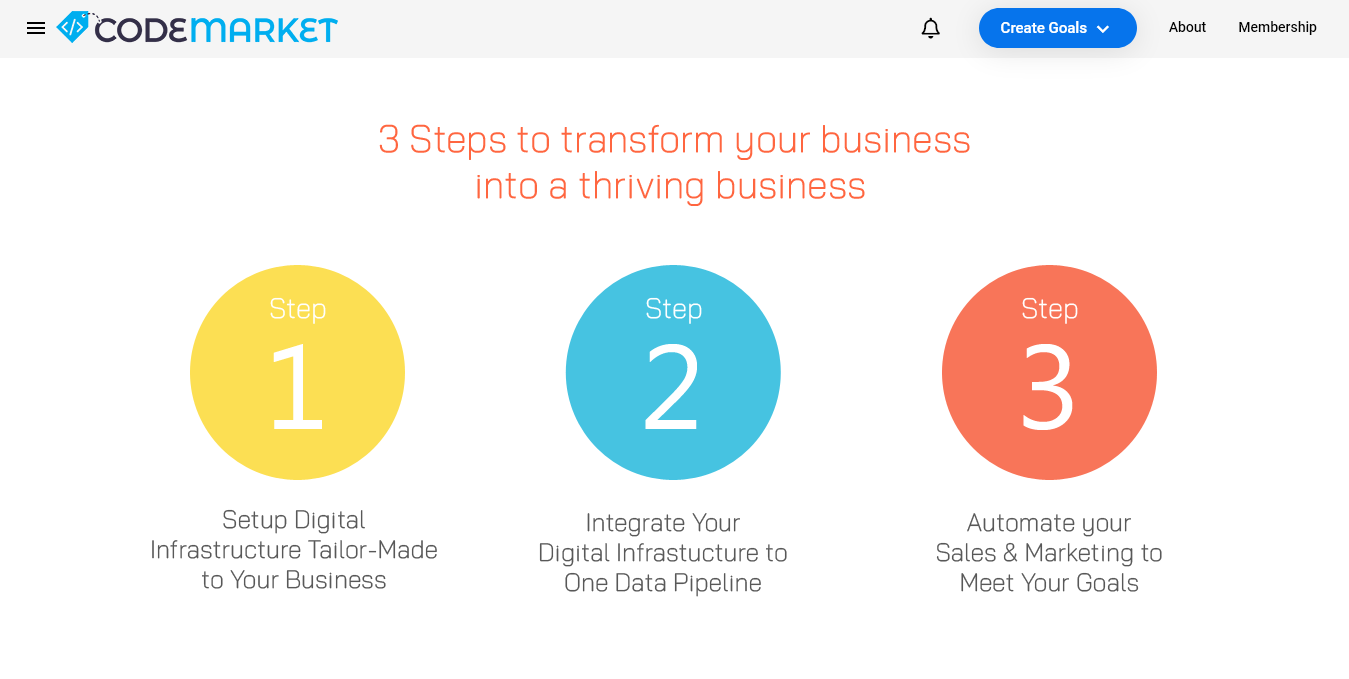
<style>
.page{position:relative;width:1349px;height:679px;background:#ffffff}
.page>*{position:absolute;margin:0}
.t1{font:38px "Rectory-Regular";color:#ff6640}
.t2{font:28.1px "Rectory-Regular";color:#ffffff}
.t3{font:120px "SegoeUISymbol";color:#ffffff}
.t4{font:25px "Rectory-Regular";color:#585858}
</style>
<div class="page">
<p class="t1" style="left:379px;top:124px;width:591px;height:82px;text-align:center">3 Steps to transform your business <br>into a thriving business</p>
<p class="t2" style="left:270px;top:297px;width:56px;height:27px">Step</p>
<p class="t2" style="left:646px;top:297px;width:56px;height:27px">Step</p>
<p class="t2" style="left:1022px;top:297px;width:56px;height:27px">Step</p>
<p class="t3" style="left:273px;top:344px;width:49px;height:85px">1</p>
<p class="t3" style="left:645px;top:344px;width:52px;height:85px">2</p>
<p class="t3" style="left:1023px;top:344px;width:50px;height:86px">3</p>
<p class="t4" style="left:152px;top:509px;width:285px;height:80px;text-align:center">Setup Digital <br>Infrastructure Tailor-Made to Your Business</p>
<p class="t4" style="left:539px;top:513px;width:248px;height:84px;text-align:center">Integrate Your <br>Digital Infrastucture to <br>One Data Pipeline</p>
<p class="t4" style="left:936px;top:513px;width:226px;height:79px;text-align:center">Automate your <br>Sales &amp; Marketing to <br>Meet Your Goals</p>
</div>
